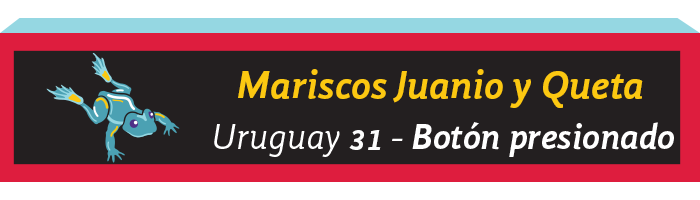
<style>
.page{position:relative;width:700px;height:200px;background:#231f20}
.page>*{position:absolute;margin:0}
.t1{font:39.9px "GandhiSans-BoldItalic";color:#fcc811}
.t2{font:30.8px "GandhiSans-BoldItalic";color:#fcfcfc}
</style>
<div class="page">
<p class="t1" style="left:238px;top:69px;width:405px;height:39px">Mariscos Juanio y Queta</p>
<p class="t2" style="left:349px;top:130px;width:32px;height:20px">31</p>
</div>
